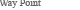
<style>
.page{position:relative;width:80px;height:10px;background:#ffffff}
.page>*{position:absolute;margin:0}
.t1{font:10px "TimesNewRomanPSMT";color:#646464}
</style>
<div class="page">
<p class="t1" style="left:0px;top:0px;width:41px;height:8px">Way Point</p>
</div>
